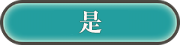
<style>
.page{position:relative;width:180px;height:45px;background:#239e9f}
.page>*{position:absolute;margin:0}
.t1{font:24px "RyuminPr6N-ExBold";color:#fff7f5}
</style>
<div class="page">
<p class="t1" style="left:79px;top:10px;width:23px;height:23px">是</p>
</div>
